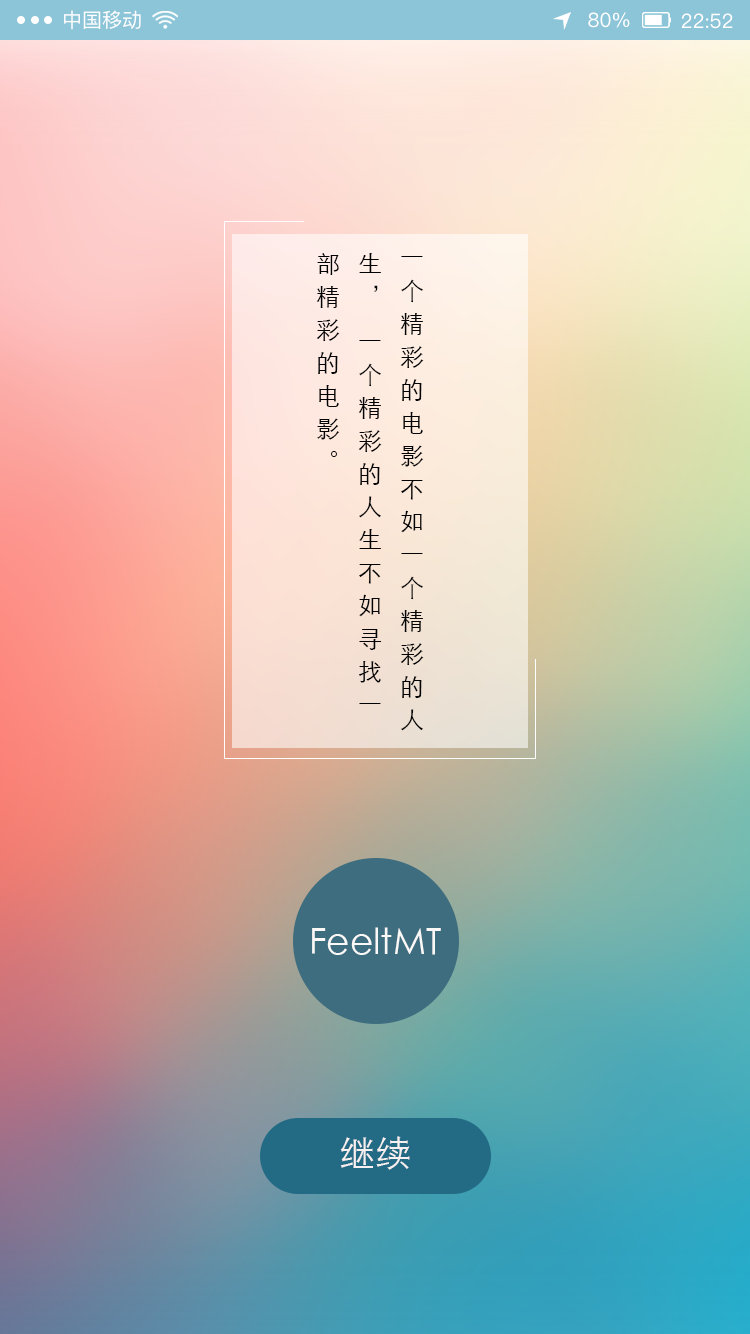
<style>
.page{position:relative;width:750px;height:1334px}
.page>*{position:absolute;margin:0}
.t1{font:20px "PingFangSC-Regular";color:#ffffff}
.t2{font:24px "STXihei";color:#020202}
.t3{font:36px "STXihei";color:#fbf8f8}
.t4{font:36px "STXihei";color:#f7f0f0}
</style>
<div class="page">
<p class="t1" style="left:64px;top:10px;width:77px;height:20px">中国移动</p>
<p class="t1" style="left:588px;top:12px;width:42px;height:16px">80%</p>
<p class="t1" style="left:681px;top:13px;width:52px;height:16px">22:52</p>
<p class="t2" style="left:316px;top:253px;width:108px;height:478px">一个精彩的电影不如一个精彩的人<br> 生，一个精彩的人生不如寻找一<br> 部精彩的电影。</p>
<p class="t3" style="left:312px;top:927px;width:129px;height:28px">FeeltMT</p>
<p class="t4" style="left:340px;top:1136px;width:70px;height:34px">继续</p>
</div>
